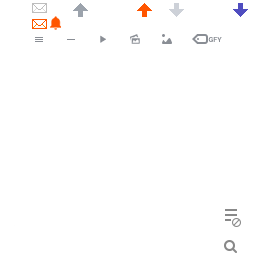
<style>
.page{position:relative;width:256px;height:256px;background:#ffffff}
.page>*{position:absolute;margin:0}
.t1{font:7px "Roboto-Bold";color:#8a8e95}
</style>
<div class="page">
<p class="t1" style="left:208px;top:37px;width:14px;height:5px">GFY</p>
</div>
